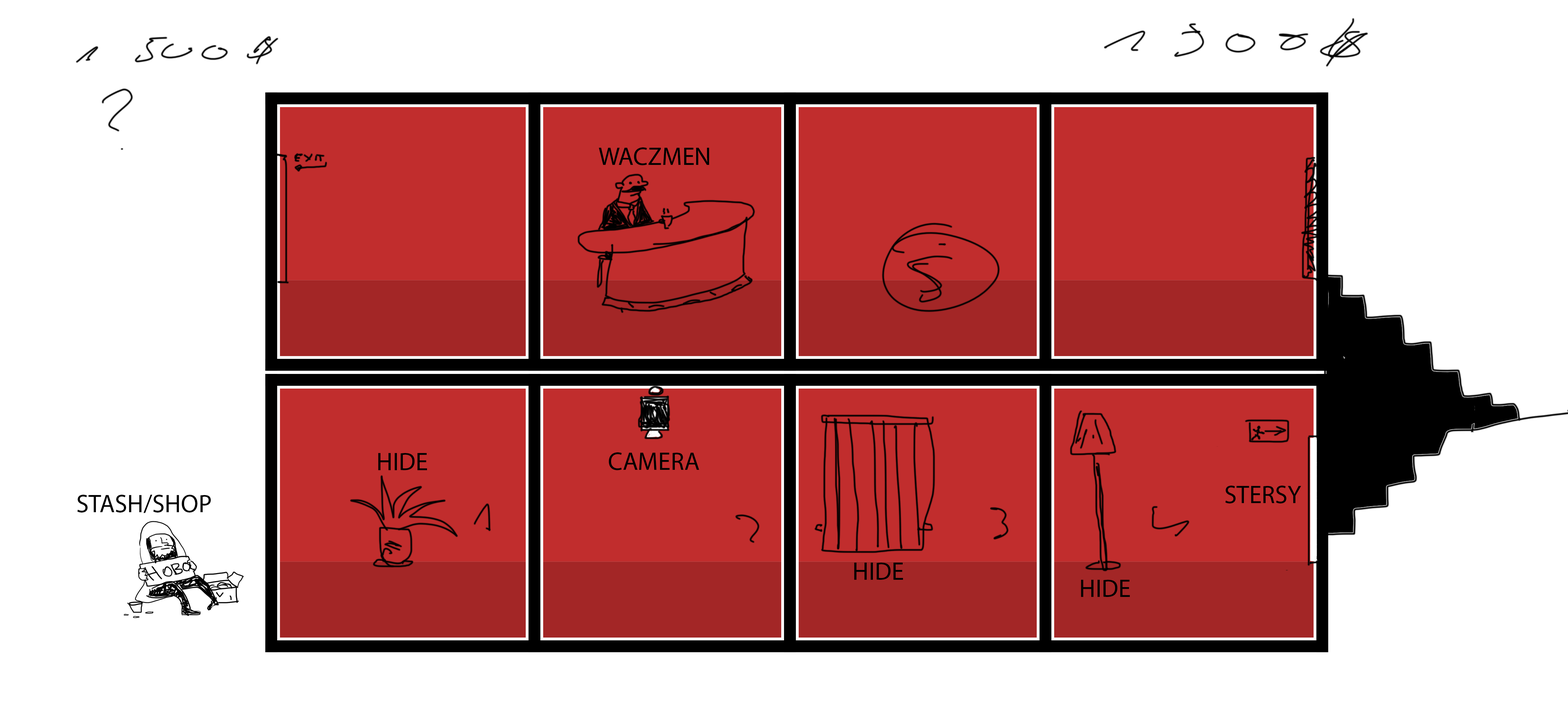
<style>
.page{position:relative;width:1568px;height:710px;background:#ffffff}
.page>*{position:absolute;margin:0}
.t1{font:25.2px "MyriadPro-Regular";color:#000000}
</style>
<div class="page">
<p class="t1" style="left:599px;top:147px;width:110px;height:18px">WACZMEN</p>
<p class="t1" style="left:378px;top:453px;width:49px;height:17px">HIDE</p>
<p class="t1" style="left:609px;top:452px;width:90px;height:18px">CAMERA</p>
<p class="t1" style="left:1225px;top:485px;width:76px;height:18px">STERSY</p>
<p class="t1" style="left:77px;top:495px;width:134px;height:18px">STASH/SHOP</p>
<p class="t1" style="left:854px;top:562px;width:49px;height:18px">HIDE</p>
<p class="t1" style="left:1081px;top:580px;width:49px;height:17px">HIDE</p>
</div>
